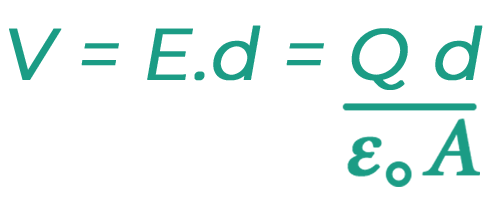
<style>
.page{position:relative;width:499px;height:203px;background:#ffffff}
.page>*{position:absolute;margin:0}
.t1{font:72px "Montserrat-Regular";letter-spacing:0.005em;color:#1b9c85;font-weight:bold;font-style:italic}
</style>
<div class="page">
<p class="t1" style="left:9px;top:25px;width:474px;height:65px">V = E.d = Q d</p>
</div>
